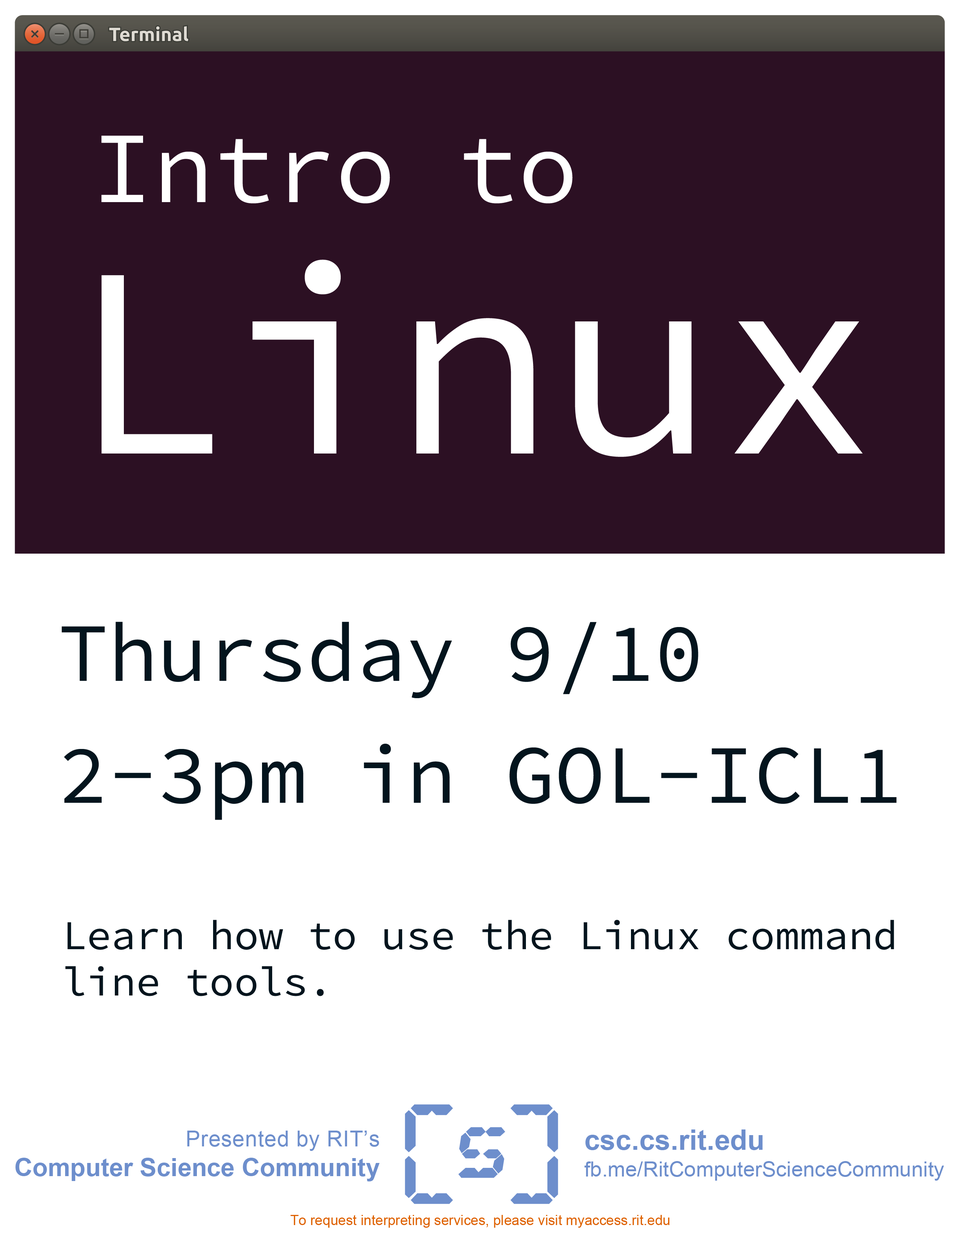
<style>
.page{position:relative;width:960px;height:1242px;background:#ffffff}
.page>*{position:absolute;margin:0}
.t1{font:101.4px "SourceCodePro-Regular";color:#ffffff}
.t2{font:271.6px "SourceCodePro-Regular";color:#ffffff}
.t3{font:82.7px/121.9px "SourceCodePro-Regular";color:#03141d}
.t4{font:41px/46.5px "SourceCodePro-Regular";color:#03141d}
.t5{font:41px/62px "SourceCodePro-Regular";color:#03141d}
.t6{font:41px/68.3px "SourceCodePro-Regular";color:#03141d}
.t7{font:25.1px/29.8px "Arial-BoldMT";color:#6d8ecc}
.t8{font:22px/29.8px "ArialMT";letter-spacing:0.02em;color:#6d8ecc}
.t9{font:21.2px/26.7px "ArialMT";color:#6d8ecc}
.t10{font:28.2px/26.7px "Arial-BoldMT";color:#6d8ecc}
.t11{font:13.9px "ArialMT";color:#de6100}
</style>
<div class="page">
<p class="t1" style="left:101px;top:136px;width:472px;height:68px">Intro to</p>
<p class="t2" style="left:101px;top:260px;width:762px;height:197px">Linux</p>
<p class="t3" style="left:62px;top:622px;width:835px;height:198px">Thursday 9/10<br>2-3pm in GOL-ICL1</p>
<p class="t4" style="left:65px;top:920px;width:829px;height:76px"><span class="t5">Learn ho</span><span class="t6">w to use</span> the Linux command<br>line tools.</p>
<p class="t7" style="left:15px;top:1131px;width:365px;height:51px;text-align:right"><span class="t8">Presented by RIT’s<br></span>Computer Science Community</p>
<p class="t9" style="left:584px;top:1130px;width:360px;height:51px"><span class="t10">csc.cs.rit.edu<br></span>fb.me/RitComputerScienceCommunity</p>
<p class="t11" style="left:290px;top:1215px;width:379px;height:13px">To request interpreting services, please visit myaccess.rit.edu</p>
</div>
